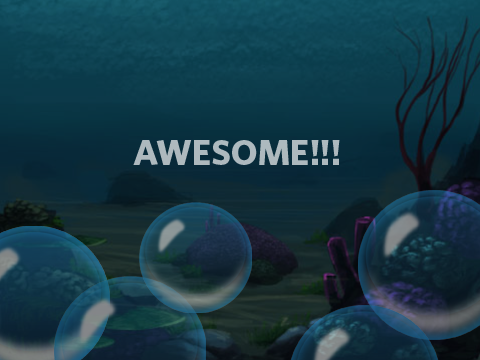
<style>
.page{position:relative;width:480px;height:360px}
.page>*{position:absolute;margin:0}
.t1{font:36.2px "WhitneyHTF-Bold";color:#aeb9be}
</style>
<div class="page">
<p class="t1" style="left:133px;top:140px;width:207px;height:25px">AWESOME!!!</p>
</div>
